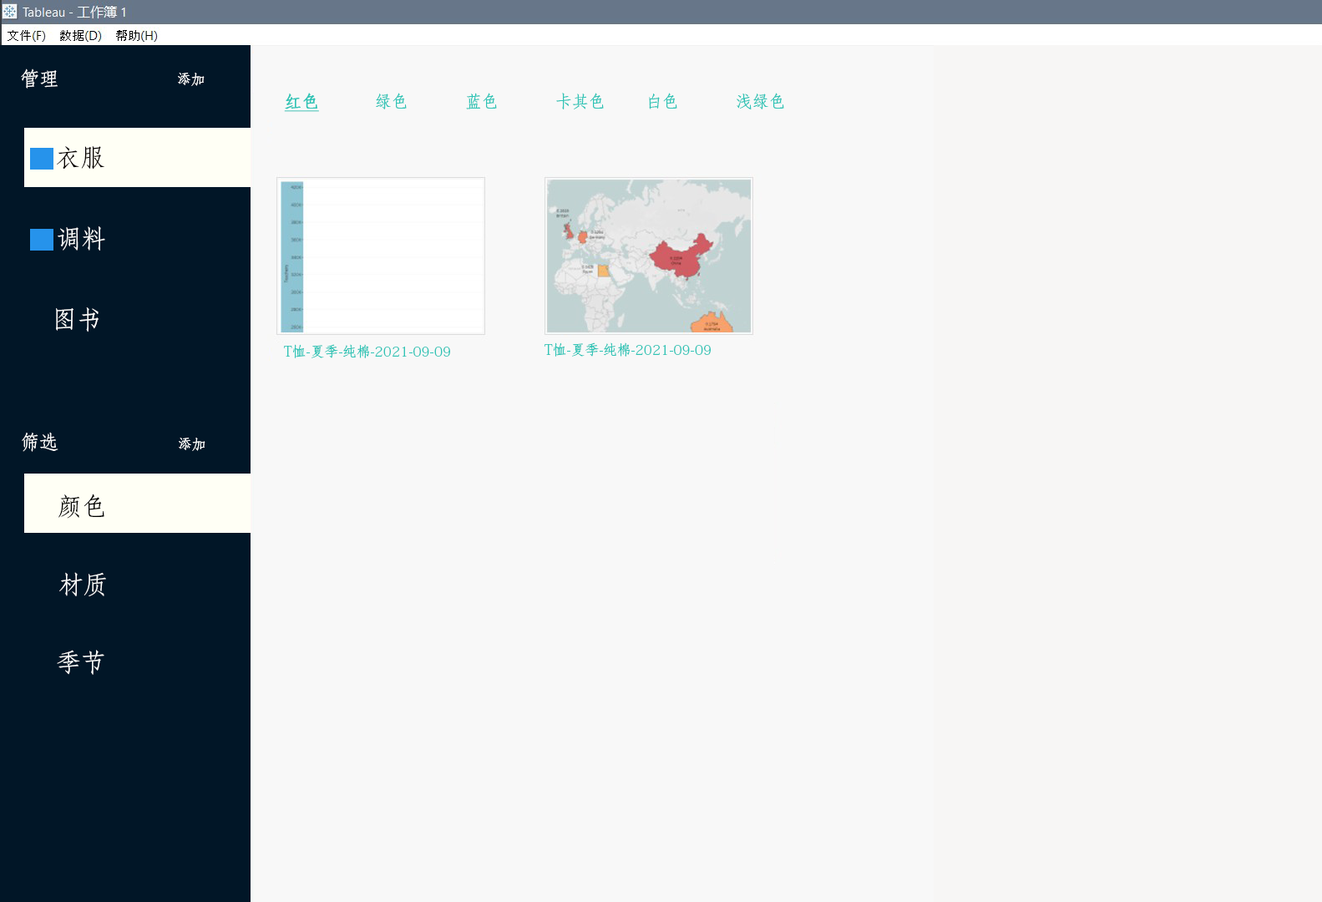
<style>
.page{position:relative;width:1322px;height:902px;background:#f8f8f8}
.page>*{position:absolute;margin:0}
.t1{font:19.5px "AdobeFangsongStd-Regular";color:#ffffff}
.t2{font:13.9px "AdobeFangsongStd-Regular";color:#ffffff}
.t3{font:16.7px "AdobeFangsongStd-Regular";color:#2ec4b6}
.t4{font:16.7px "AdobeFangsongStd-Regular";color:#2ec4b6;font-weight:bold;text-decoration:underline}
.t5{font:25.1px "AdobeFangsongStd-Regular";color:#060000}
.t6{font:25.1px "AdobeFangsongStd-Regular";color:#fefefe}
.t7{font:13.9px "AdobeFangsongStd-Regular";color:#2ec4b6}
.t8{font:25.1px "AdobeFangsongStd-Regular";color:#000000}
</style>
<div class="page">
<p class="t1" style="left:21px;top:68px;width:37px;height:21px">管理</p>
<p class="t2" style="left:178px;top:73px;width:27px;height:13px">添加</p>
<p class="t3" style="left:284px;top:93px;width:500px;height:19px"><span class="t4">红色</span>  绿色  蓝色  卡其色  白色  浅绿色</p>
<p class="t5" style="left:57px;top:145px;width:47px;height:25px">衣服</p>
<p class="t6" style="left:58px;top:226px;width:47px;height:25px">调料</p>
<p class="t6" style="left:56px;top:307px;width:43px;height:25px">图书</p>
<p class="t7" style="left:283px;top:344px;width:167px;height:14px">T恤-夏季-纯棉-2021-09-09</p>
<p class="t7" style="left:544px;top:342px;width:167px;height:15px">T恤-夏季-纯棉-2021-09-09</p>
<p class="t1" style="left:22px;top:432px;width:36px;height:20px">筛选</p>
<p class="t2" style="left:179px;top:438px;width:26px;height:13px">添加</p>
<p class="t8" style="left:58px;top:494px;width:46px;height:25px">颜色</p>
<p class="t6" style="left:59px;top:572px;width:47px;height:24px">材质</p>
<p class="t6" style="left:57px;top:650px;width:47px;height:25px">季节</p>
</div>
